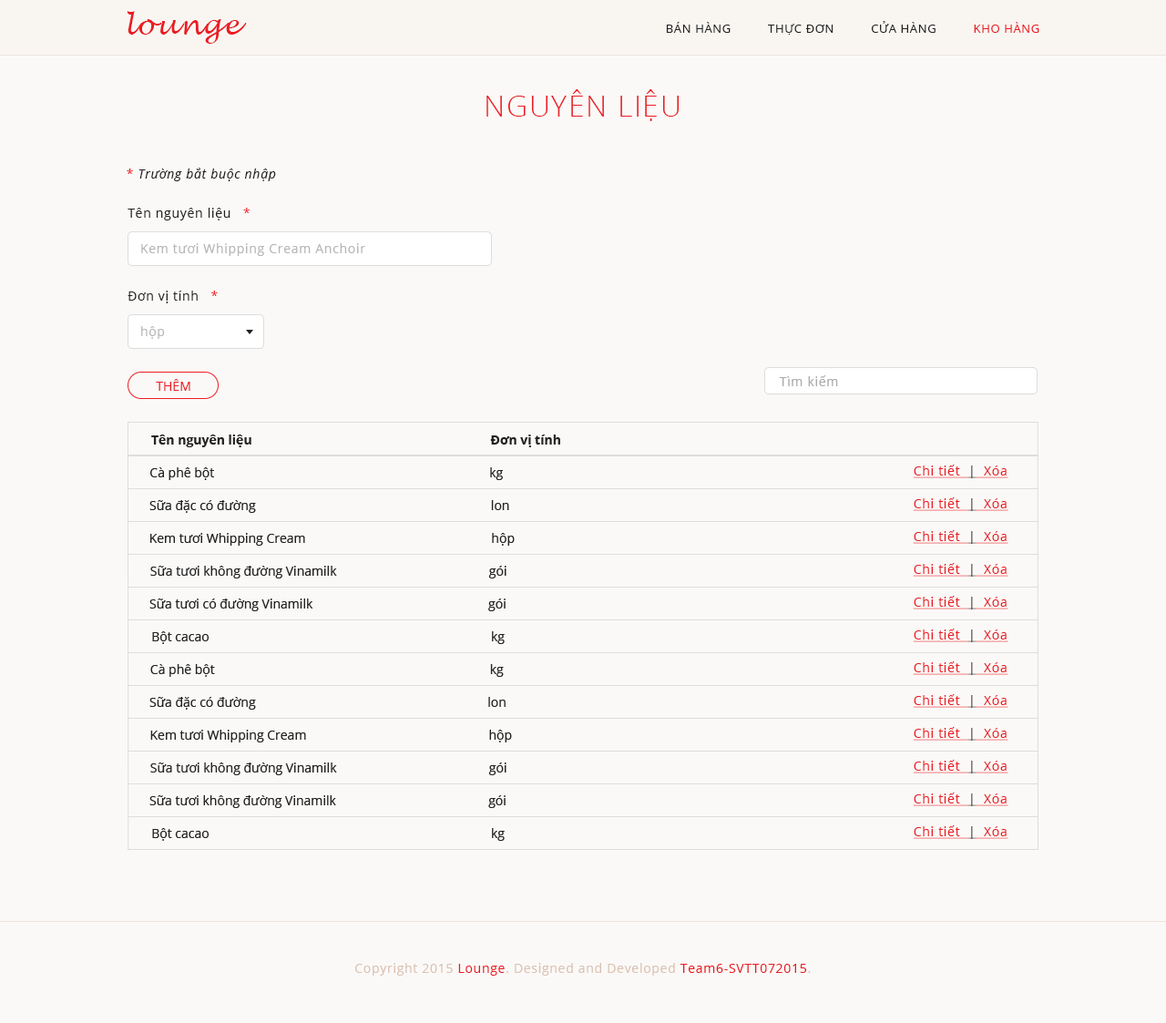
<style>
.page{position:relative;width:1166px;height:1023px;background:#fbf9f7}
.page>*{position:absolute;margin:0}
.t1{font:27.3px "LucidaHandwriting-Italic";letter-spacing:0.05em;color:#ea1d24}
.t2{font:11.8px "OpenSans";letter-spacing:0.05em;color:#222222}
.t3{font:11.8px "OpenSans";letter-spacing:0.05em;color:#ea1d24}
.t4{font:29.1px "OpenSans-Light";letter-spacing:0.05em;color:#ea1d24}
.t5{font:12.8px "OpenSans-Italic";letter-spacing:0.05em;color:#222222}
.t6{font:12.8px "OpenSans";letter-spacing:0.05em;color:#ea1d24}
.t7{font:12.8px "OpenSans";letter-spacing:0.05em;color:#222222}
.t8{font:12.8px "OpenSans";letter-spacing:0.05em;color:#b7b7b7}
.t9{font:12.8px "OpenSans";letter-spacing:0.05em;color:#acacac}
.t10{font:12.8px "OpenSans";color:#ea1d24}
.t11{font:12.8px/32.8px "OpenSans";letter-spacing:0.05em;color:#ea1d24;text-decoration:underline}
.t12{font:12.8px/32.8px "OpenSans";letter-spacing:0.05em;color:#3d2a23;text-decoration:underline}
.t13{font:12.8px "OpenSans";letter-spacing:0.05em;color:#dac3b4}
.t14{font:12.8px "OpenSans";letter-spacing:0.05em;color:#ea1b23}
</style>
<div class="page">
<p class="t1" style="left:127px;top:11px;width:120px;height:33px">lounge</p>
<p class="t2" style="left:666px;top:21px;width:373px;height:14px">BÁN HÀNG          THỰC ĐƠN          CỬA HÀNG          <span class="t3">KHO HÀNG</span></p>
<p class="t4" style="left:486px;top:89px;width:193px;height:32px">NGUYÊN LIỆU</p>
<p class="t5" style="left:127px;top:168px;width:149px;height:13px"><span class="t6">* </span>Trường bắt buộc nhập</p>
<p class="t7" style="left:128px;top:208px;width:122px;height:12px">Tên nguyên liệu   <span class="t6">*</span></p>
<p class="t8" style="left:141px;top:243px;width:224px;height:13px">Kem tươi Whipping Cream Anchoir</p>
<p class="t7" style="left:128px;top:291px;width:90px;height:12px">Đơn vị tính   <span class="t6">*</span></p>
<p class="t8" style="left:141px;top:326px;width:24px;height:13px">hộp</p>
<p class="t9" style="left:779px;top:375px;width:59px;height:11px">Tìm kiếm</p>
<p class="t10" style="left:156px;top:379px;width:34px;height:12px">THÊM</p>
<p class="t11" style="left:913px;top:465px;width:95px;height:374px">Chi tiết  <span class="t12">|</span>  Xóa<br>Chi tiết  <span class="t12">|</span>  Xóa<br>Chi tiết  <span class="t12">|</span>  Xóa<br>Chi tiết  <span class="t12">|</span>  Xóa<br>Chi tiết  <span class="t12">|</span>  Xóa<br>Chi tiết  <span class="t12">|</span>  Xóa<br>Chi tiết  <span class="t12">|</span>  Xóa<br>Chi tiết  <span class="t12">|</span>  Xóa<br>Chi tiết  <span class="t12">|</span>  Xóa<br>Chi tiết  <span class="t12">|</span>  Xóa<br>Chi tiết  <span class="t12">|</span>  Xóa<br>Chi tiết  <span class="t12">|</span>  Xóa</p>
<p class="t13" style="left:355px;top:963px;width:456px;height:12px">Copyright 2015 <span class="t14">Lounge</span>. Designed and Developed <span class="t14">Team6-SVTT072015</span>.</p>
</div>
